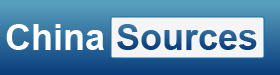
<style>
.page{position:relative;width:280px;height:75px}
.page>*{position:absolute;margin:0}
.t1{font:36px "Arial-BoldMT";color:#ffffff}
.t2{font:36px "Arial-BoldMT";color:#225c91}
</style>
<div class="page">
<p class="t1" style="left:5px;top:19px;width:100px;height:45px">China</p>
<p class="t2" style="left:116px;top:19px;width:142px;height:45px">Sources</p>
</div>
